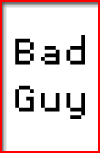
<style>
.page{position:relative;width:100px;height:153px;background:#ffffff}
.page>*{position:absolute;margin:0}
.t1{font:59px/47px "ProggyTinyTTSZ";letter-spacing:0.06em;color:#000000}
</style>
<div class="page">
<p class="t1" style="left:15px;top:35px;width:70px;height:84px;text-align:center">Bad<br>Guy</p>
</div>
